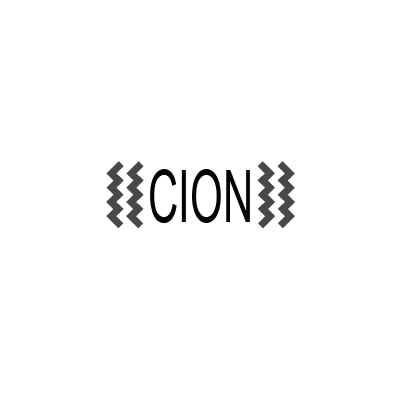
<style>
.page{position:relative;width:400px;height:400px;background:#ffffff}
.page>*{position:absolute;margin:0}
.t1{font:71.9px "ArialMT";color:#030303;scale:0.58 1}
</style>
<div class="page">
<p class="t1" style="left:150px;top:169px;width:100px;height:54px">CION</p>
</div>
